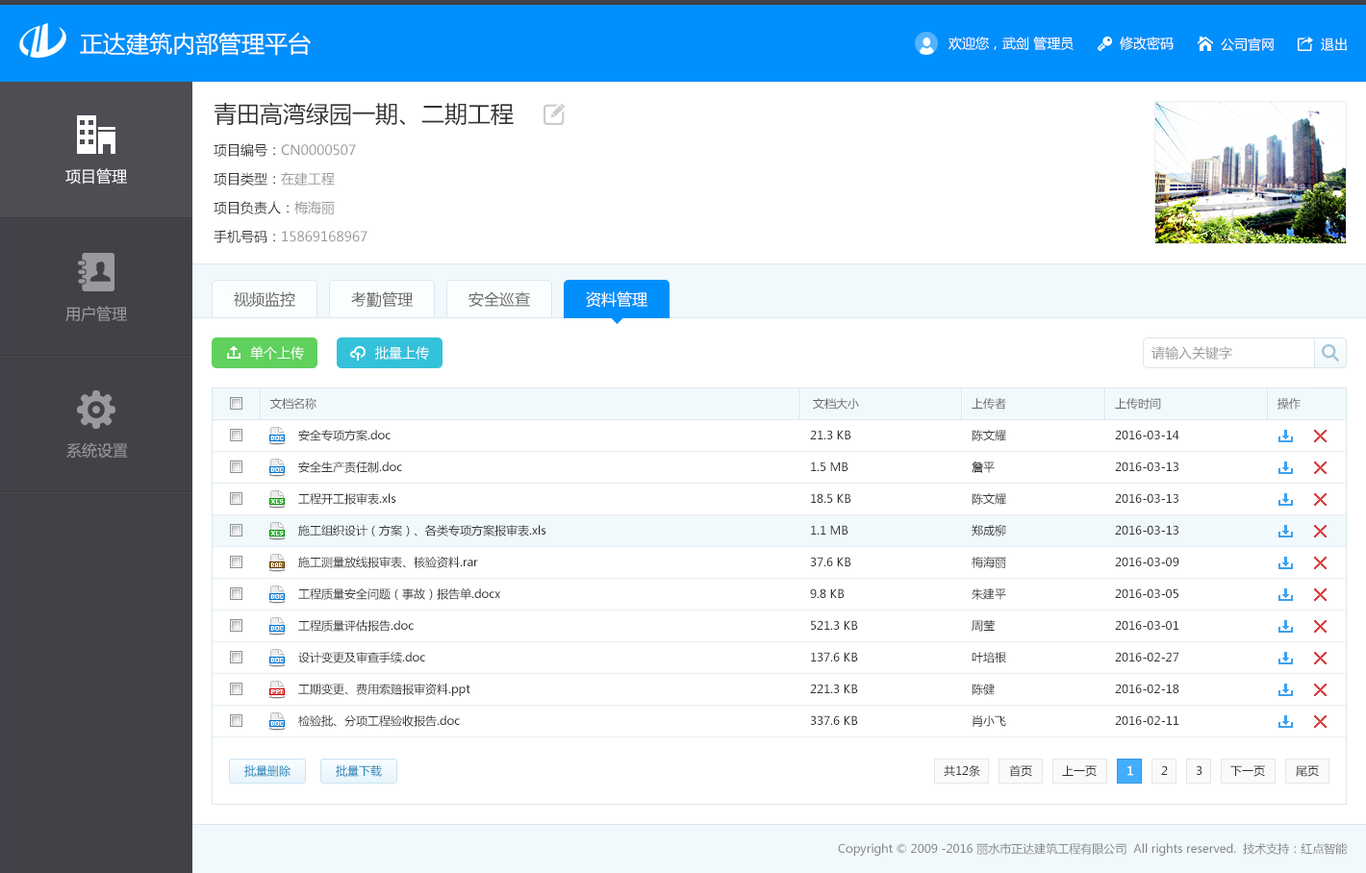
<style>
.page{position:relative;width:1366px;height:873px;background:#ffffff}
.page>*{position:absolute;margin:0}
.t1{font:23.1px "MicrosoftYaHei";color:#ffffff}
.t2{font:13.5px "MicrosoftYaHei";color:#ffffff}
.t3{font:23.1px "MicrosoftYaHei";color:#333333}
.t4{font:13.5px/28.9px "MicrosoftYaHei";color:#999999}
.t5{font:13.5px/28.9px "MicrosoftYaHei";color:#333333}
.t6{font:15.4px "MicrosoftYaHei";color:#ffffff}
.t7{font:15.4px "MicrosoftYaHei";color:#666666;text-transform:uppercase}
.t8{font:15.4px "MicrosoftYaHei";color:#ffffff;text-transform:uppercase}
.t9{font:15.4px "MicrosoftYaHei";color:#9a999e}
.t10{font:13.5px "MicrosoftYaHei";color:#999999;text-transform:uppercase}
.t11{font:11.5px "MicrosoftYaHei";color:#666666}
.t12{font:11.5px/31.7px "MicrosoftYaHei";color:#333333}
.t13{font:11.5px "MicrosoftYaHei";color:#1b84ba}
.t14{font:11.5px "MicrosoftYaHei";color:#333333}
.t15{font:11.5px "MicrosoftYaHei";color:#ffffff;font-weight:bold}
.t16{font:11.5px "MicrosoftYaHei";color:#888888}
</style>
<div class="page">
<p class="t1" style="left:80px;top:32px;width:231px;height:24px">正达建筑内部管理平台</p>
<p class="t2" style="left:948px;top:37px;width:125px;height:13px">欢迎您，武剑 管理员</p>
<p class="t2" style="left:1119px;top:37px;width:54px;height:13px">修改密码</p>
<p class="t2" style="left:1220px;top:38px;width:53px;height:13px">公司官网</p>
<p class="t2" style="left:1320px;top:38px;width:26px;height:13px">退出</p>
<p class="t3" style="left:213px;top:102px;width:301px;height:24px">青田高湾绿园一期、二期工程</p>
<p class="t4" style="left:213px;top:143px;width:154px;height:100px"><span class="t5">项目编号：</span>CN0000507 <span class="t5">        <br>项目类型：</span>在建工程<br><span class="t5">项目负责人：</span>梅海丽<span class="t5">              <br>手机号码：</span>15869168967</p>
<p class="t6" style="left:65px;top:168px;width:62px;height:17px">项目管理</p>
<p class="t7" style="left:234px;top:291px;width:61px;height:17px">视频监控</p>
<p class="t7" style="left:351px;top:291px;width:62px;height:17px">考勤管理</p>
<p class="t7" style="left:468px;top:291px;width:62px;height:16px">安全巡查</p>
<p class="t8" style="left:586px;top:291px;width:61px;height:17px">资料管理</p>
<p class="t9" style="left:65px;top:306px;width:62px;height:16px">用户管理</p>
<p class="t2" style="left:250px;top:346px;width:54px;height:14px">单个上传</p>
<p class="t2" style="left:375px;top:346px;width:54px;height:14px">批量上传</p>
<p class="t10" style="left:1151px;top:346px;width:81px;height:14px">请输入关键字</p>
<p class="t11" style="left:270px;top:398px;width:46px;height:12px">文档名称</p>
<p class="t11" style="left:813px;top:398px;width:46px;height:12px">文档大小</p>
<p class="t11" style="left:971px;top:398px;width:35px;height:12px">上传者</p>
<p class="t11" style="left:1115px;top:398px;width:46px;height:12px">上传时间</p>
<p class="t11" style="left:1277px;top:398px;width:23px;height:12px">操作</p>
<p class="t12" style="left:298px;top:429px;width:248px;height:298px">安全专项方案.doc<br>安全生产责任制.doc<br>工程开工报审表.xls<br>施工组织设计（方案）、各类专项方案报审表.xls<br>施工测量放线报审表、核验资料.rar<br>工程质量安全问题（事故）报告单.docx<br>工程质量评估报告.doc<br>设计变更及审查手续.doc<br>工期变更、费用索赔报审资料.ppt<br>检验批、分项工程验收报告.doc</p>
<p class="t12" style="left:810px;top:430px;width:48px;height:295px">21.3 KB<br>1.5 MB<br>18.5 KB<br>1.1 MB<br>37.6 KB<br>9.8 KB<br>521.3 KB<br>137.6 KB<br>221.3 KB<br>337.6 KB</p>
<p class="t12" style="left:971px;top:430px;width:35px;height:297px">陈文耀<br>詹平<br>陈文耀<br>郑成柳<br>梅海丽<br>朱建平<br>周莹<br>叶培根<br>陈健<br>肖小飞</p>
<p class="t12" style="left:1115px;top:430px;width:64px;height:295px">2016-03-14<br>2016-03-13<br>2016-03-13<br>2016-03-13<br>2016-03-09<br>2016-03-05<br>2016-03-01<br>2016-02-27<br>2016-02-18<br>2016-02-11</p>
<p class="t9" style="left:66px;top:442px;width:62px;height:17px">系统设置</p>
<p class="t13" style="left:244px;top:765px;width:46px;height:12px">批量删除</p>
<p class="t13" style="left:336px;top:765px;width:46px;height:12px">批量下载</p>
<p class="t14" style="left:943px;top:765px;width:37px;height:12px">共12条</p>
<p class="t14" style="left:1009px;top:765px;width:23px;height:12px">首页</p>
<p class="t14" style="left:1062px;top:765px;width:34px;height:12px">上一页</p>
<p class="t15" style="left:1127px;top:765px;width:6px;height:11px">1</p>
<p class="t14" style="left:1161px;top:765px;width:6px;height:10px">2</p>
<p class="t14" style="left:1195px;top:765px;width:7px;height:10px">3</p>
<p class="t14" style="left:1230px;top:765px;width:35px;height:12px">下一页</p>
<p class="t14" style="left:1295px;top:765px;width:23px;height:12px">尾页</p>
<p class="t16" style="left:838px;top:842px;width:508px;height:14px">Copyright © 2009 -2016 丽水市正达建筑工程有限公司  All rights reserved.  技术支持：红点智能</p>
</div>
